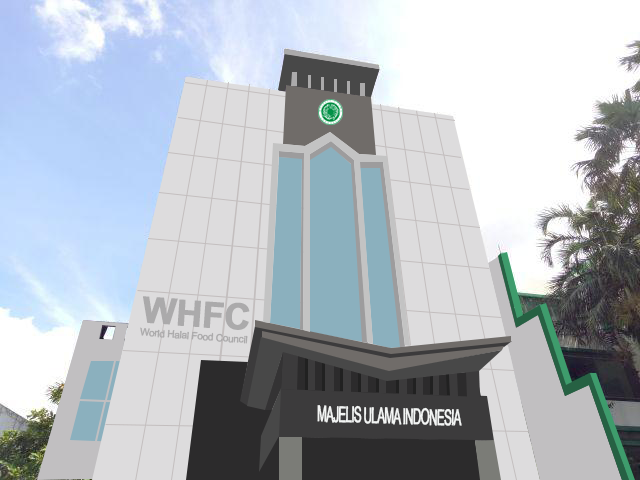
<style>
.page{position:relative;width:640px;height:480px}
.page>*{position:absolute;margin:0}
.t1{font:36px "Arial-BoldMT";letter-spacing:-0.025em;color:#abaaab;font-weight:bold}
.t2{font:10px "ArialMT";letter-spacing:-0.05em;color:#abaaab;font-weight:bold}
.t3{font:22px "ArialNarrow";letter-spacing:-0.075em;color:#f3f5f4;font-weight:bold;scale:0.65 1}
</style>
<div class="page">
<p class="t1" style="left:143px;top:296px;width:107px;height:34px;rotate:4deg">WHFC</p>
<p class="t2" style="left:140px;top:327px;width:108px;height:17px;rotate:4deg">World Halal Food Council</p>
<p class="t3" style="left:317px;top:405px;width:145px;height:21px;rotate:2deg">MAJELIS ULAMA INDONESIA</p>
</div>
